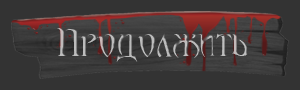
<style>
.page{position:relative;width:300px;height:90px;background:#333333}
.page>*{position:absolute;margin:0}
.t1{font:36px "ArthurGothic"}
</style>
<div class="page">
<p class="t1" style="left:57px;top:28px;width:191px;height:34px">Продолжить</p>
</div>
